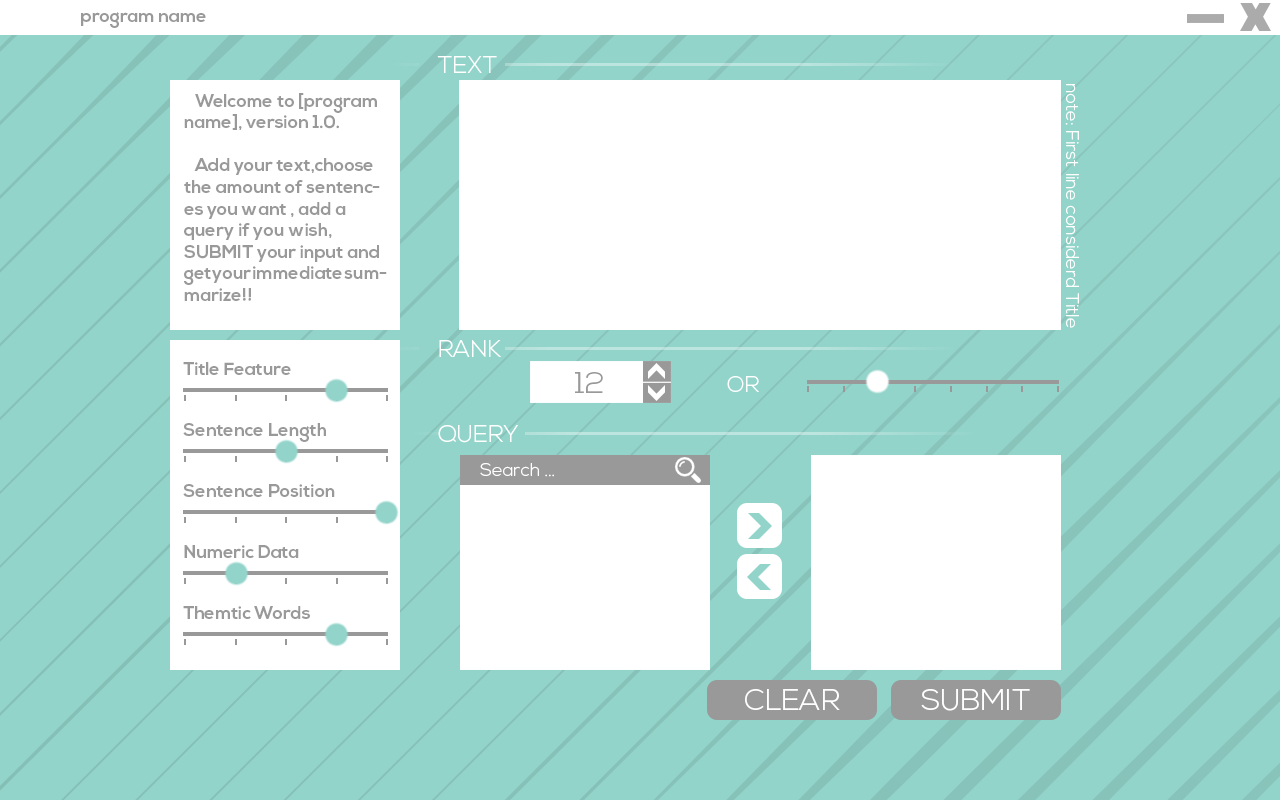
<style>
.page{position:relative;width:1280px;height:800px;background:#92d4ca}
.page>*{position:absolute;margin:0}
.t1{font:18px "NexaBold";color:#999999}
.t2{font:24px "NexaLight";color:#ffffff;text-transform:uppercase}
.t3{font:18px "NexaLight";color:#ffffff}
.t4{font:30px "NexaLight";color:#999999;text-transform:uppercase}
.t5{font:22.5px "NexaLight";color:#ffffff}
.t6{font:30px "NexaLight";color:#ffffff;text-transform:uppercase}
</style>
<div class="page">
<p class="t1" style="left:81px;top:12px;width:125px;height:16px">program name</p>
<p class="t2" style="left:437px;top:56px;width:60px;height:17px">TEXT</p>
<p class="t3" style="left:1065px;top:84px;width:14px;height:244px;rotate:90deg">note: First line considerd Title</p>
<p class="t1" style="left:184px;top:93px;width:203px;height:208px">Welcome to [program name], version 1.0.<br><br>   Add your text,choose the amount of sentences you want , add a query if you wish, SUBMIT your input and get your immediate summarize!!</p>
<p class="t2" style="left:439px;top:340px;width:62px;height:17px">rank</p>
<p class="t1" style="left:183px;top:362px;width:108px;height:13px">Title Feature</p>
<p class="t4" style="left:575px;top:372px;width:28px;height:21px">12</p>
<p class="t5" style="left:727px;top:376px;width:32px;height:16px">OR</p>
<p class="t1" style="left:183px;top:423px;width:143px;height:19px">Sentence Length</p>
<p class="t2" style="left:438px;top:425px;width:80px;height:18px">Query</p>
<p class="t3" style="left:480px;top:463px;width:74px;height:14px">Search ...</p>
<p class="t1" style="left:183px;top:484px;width:152px;height:13px">Sentence Position</p>
<p class="t1" style="left:184px;top:545px;width:115px;height:13px">Numeric Data</p>
<p class="t1" style="left:183px;top:606px;width:127px;height:13px">Themtic Words</p>
<p class="t6" style="left:745px;top:689px;width:95px;height:21px">Clear</p>
<p class="t6" style="left:921px;top:689px;width:109px;height:22px">Submit</p>
</div>
